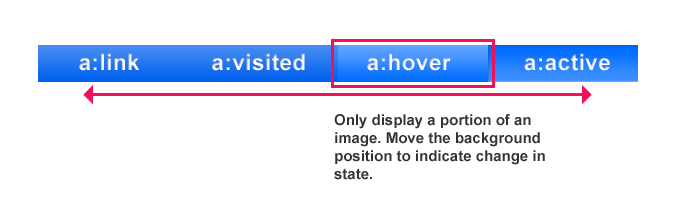
<style>
.page{position:relative;width:683px;height:207px;background:#ffffff}
.page>*{position:absolute;margin:0}
.t1{font:22.5px "Arial-BoldMT";letter-spacing:0.02em;color:#ffffff}
.t2{font:15px "Arial-BoldMT";color:#333333}
</style>
<div class="page">
<p class="t1" style="left:79px;top:53px;width:60px;height:18px">a:link</p>
<p class="t1" style="left:212px;top:53px;width:93px;height:18px">a:visited</p>
<p class="t1" style="left:367px;top:53px;width:84px;height:18px">a:hover</p>
<p class="t1" style="left:524px;top:53px;width:86px;height:18px">a:active</p>
<p class="t2" style="left:334px;top:114px;width:211px;height:66px">Only display a portion of an image. Move the background position to indicate change in<br>state.</p>
</div>
